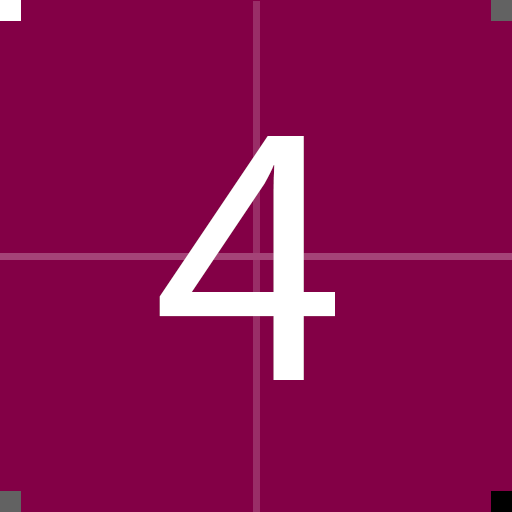
<style>
.page{position:relative;width:512px;height:512px;background:#830046}
.page>*{position:absolute;margin:0}
.t1{font:323.1px "MicrosoftYaHei";color:#ffffff}
</style>
<div class="page">
<p class="t1" style="left:159px;top:136px;width:176px;height:244px">4</p>
</div>
